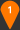
<style>
.page{position:relative;width:20px;height:30px;background:#ff7800}
.page>*{position:absolute;margin:0}
.t1{font:9px "OpenSans";color:#ffffff;font-weight:bold}
</style>
<div class="page">
<p class="t1" style="left:8px;top:6px;width:3px;height:8px">1</p>
</div>
